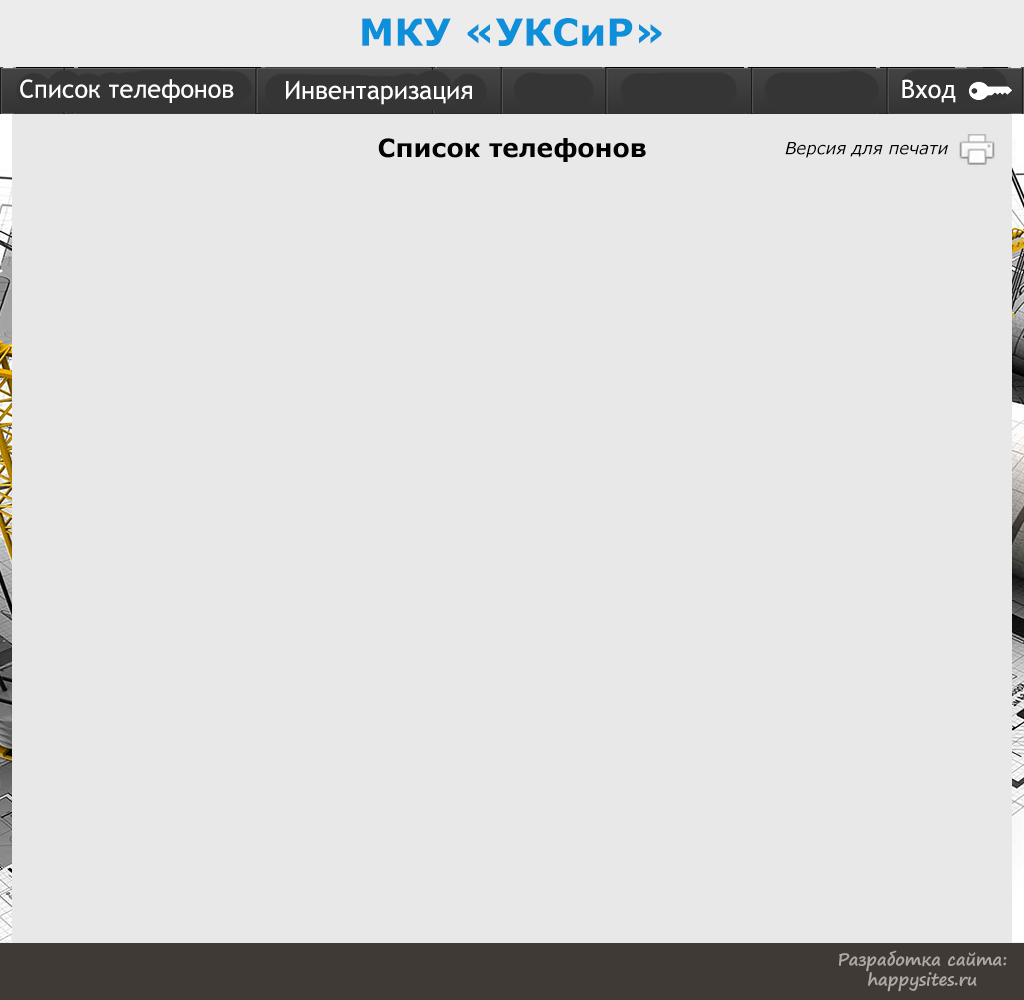
<style>
.page{position:relative;width:1024px;height:1000px;background:#e8e8e8}
.page>*{position:absolute;margin:0}
.t1{font:37.5px "Verdana-Bold";color:#0d8fd9}
.t2{font:25px "TrebuchetMS";color:#ffffff}
.t3{font:25px "Verdana-Bold";color:#010101}
.t4{font:16.7px "Verdana-Italic";color:#000000}
.t5{font:16.7px "SegoePrint-Bold";color:#b1a8a2}
</style>
<div class="page">
<p class="t1" style="left:362px;top:18px;width:300px;height:29px">МКУ «УКСиР»</p>
<p class="t2" style="left:20px;top:79px;width:214px;height:24px">Список телефонов</p>
<p class="t2" style="left:286px;top:80px;width:186px;height:25px">Инвентаризация</p>
<p class="t2" style="left:902px;top:79px;width:54px;height:24px">Вход</p>
<p class="t3" style="left:378px;top:138px;width:268px;height:24px">Список телефонов</p>
<p class="t4" style="left:785px;top:142px;width:163px;height:16px">Версия для печати</p>
<p class="t5" style="left:839px;top:950px;width:168px;height:42px;text-align:center">Разработка сайта:<br>happysites.ru</p>
</div>
